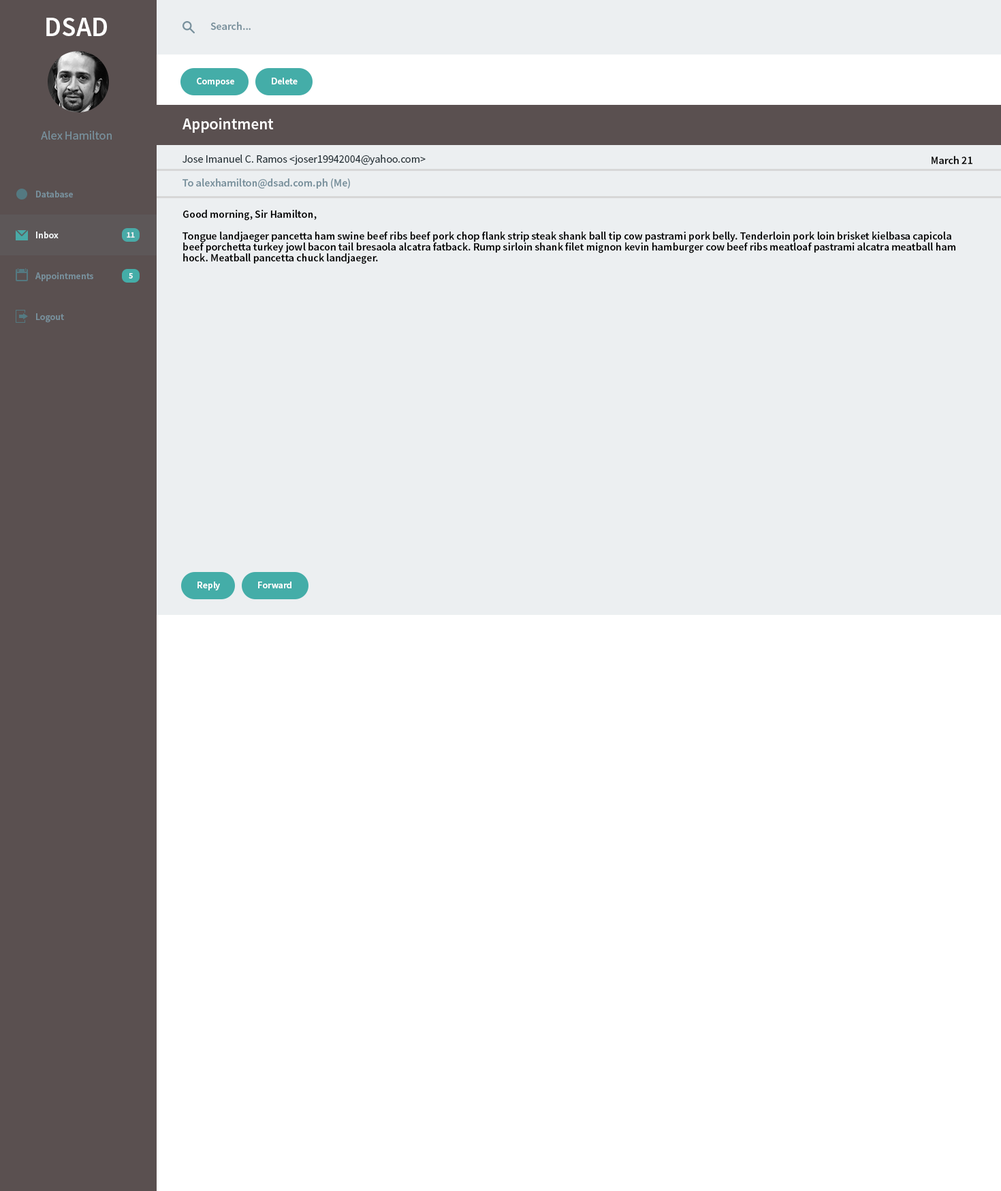
<style>
.page{position:relative;width:1001px;height:1191px;background:#ffffff}
.page>*{position:absolute;margin:0}
.t1{font:27.2px "SourceSansPro-Semibold";color:#ffffff}
.t2{font:10.9px "SourceSansPro-Semibold";color:#78909c}
.t3{font:9.5px "SourceSansPro-Semibold";color:#ffffff}
.t4{font:16.3px "SourceSansPro-Semibold";color:#ffffff}
.t5{font:12.3px "SourceSansPro-Regular";color:#78909c}
.t6{font:11px "SourceSansPro-Regular";color:#263238}
.t7{font:11.1px "SourceSansPro-Semibold";color:#000000}
.t8{font:11.1px "SourceSansPro-Semibold";color:#78909c}
.t9{font:9.5px "SourceSansPro-Semibold";color:#78909c}
.t10{font:10.9px/10.9px "SourceSansPro-Semibold";color:#000000}
.t11{font:8.2px "SourceSansPro-Bold";color:#f8fafb}
</style>
<div class="page">
<p class="t1" style="left:46px;top:18px;width:61px;height:18px">DSAD</p>
<p class="t2" style="left:210px;top:22px;width:41px;height:8px">Search...</p>
<p class="t3" style="left:197px;top:78px;width:37px;height:8px">Compose</p>
<p class="t3" style="left:272px;top:78px;width:26px;height:6px">Delete</p>
<p class="t4" style="left:183px;top:118px;width:91px;height:15px">Appointment</p>
<p class="t5" style="left:41px;top:131px;width:71px;height:9px">Alex Hamilton</p>
<p class="t6" style="left:183px;top:155px;width:243px;height:10px">Jose Imanuel C. Ramos &lt;joser19942004@yahoo.com&gt;</p>
<p class="t7" style="left:932px;top:156px;width:41px;height:8px">March 21</p>
<p class="t8" style="left:183px;top:178px;width:167px;height:11px">To alexhamilton@dsad.com.ph (Me)</p>
<p class="t9" style="left:36px;top:191px;width:37px;height:6px">Database</p>
<p class="t10" style="left:183px;top:210px;width:773px;height:54px">Good morning, Sir Hamilton,<br><br>Tongue landjaeger pancetta ham swine beef ribs beef pork chop flank strip steak shank ball tip cow pastrami pork belly. Tenderloin pork loin brisket kielbasa capicola beef porchetta turkey jowl bacon tail bresaola alcatra fatback. Rump sirloin shank filet mignon kevin hamburger cow beef ribs meatloaf pastrami alcatra meatball ham hock. Meatball pancetta chuck landjaeger.</p>
<p class="t3" style="left:36px;top:232px;width:23px;height:6px">Inbox</p>
<p class="t11" style="left:127px;top:232px;width:8px;height:6px">11</p>
<p class="t9" style="left:35px;top:272px;width:58px;height:9px">Appointments</p>
<p class="t11" style="left:129px;top:273px;width:4px;height:6px">5</p>
<p class="t9" style="left:36px;top:313px;width:28px;height:10px">Logout</p>
<p class="t3" style="left:197px;top:582px;width:23px;height:8px">Reply</p>
<p class="t3" style="left:258px;top:582px;width:33px;height:6px">Forward</p>
</div>
